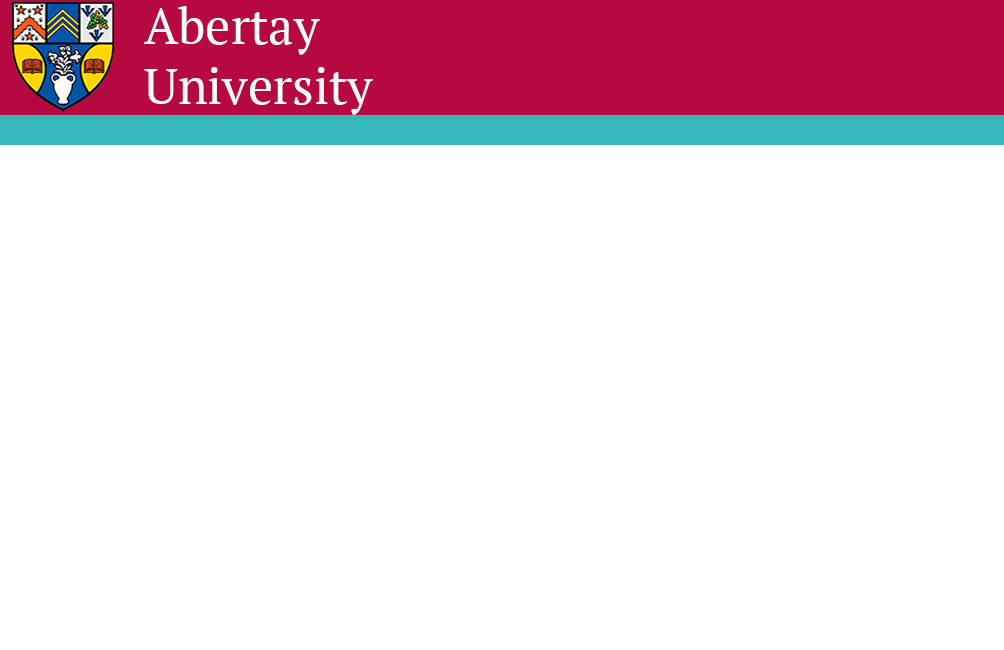
<style>
.page{position:relative;width:1004px;height:650px;background:#ffffff}
.page>*{position:absolute;margin:0}
.t1{font:50px "PTSerif-Regular";color:#fcfcfc}
</style>
<div class="page">
<p class="t1" style="left:144px;top:6px;width:229px;height:109px">Abertay <br>University</p>
</div>
